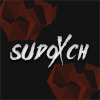
<style>
.page{position:relative;width:100px;height:100px;background:#131313}
.page>*{position:absolute;margin:0}
.t1{font:29.2px "Againts";letter-spacing:0.02em;color:#d8d8d8}
</style>
<div class="page">
<p class="t1" style="left:10px;top:34px;width:79px;height:34px">sudoXch</p>
</div>
